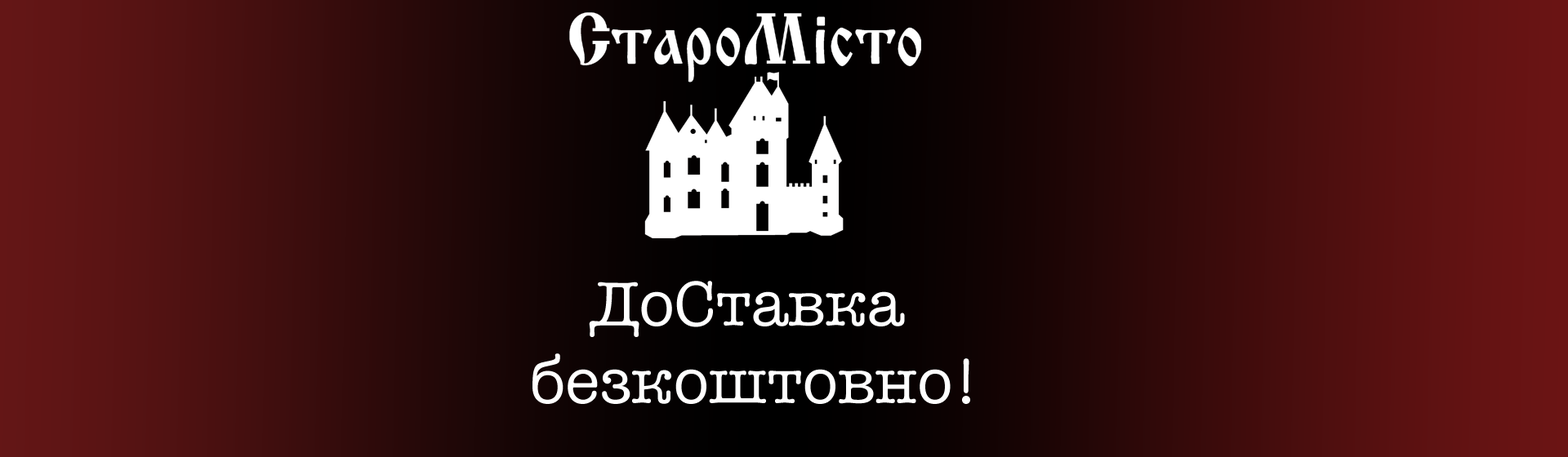
<style>
.page{position:relative;width:1568px;height:457px}
.page>*{position:absolute;margin:0}
.t1{font:64.7px "AmericanTypewriter";color:#ffffff}
</style>
<div class="page">
<p class="t1" style="left:532px;top:281px;width:438px;height:123px;text-align:center">ДоСтавка <br>безкоштовно!</p>
</div>
